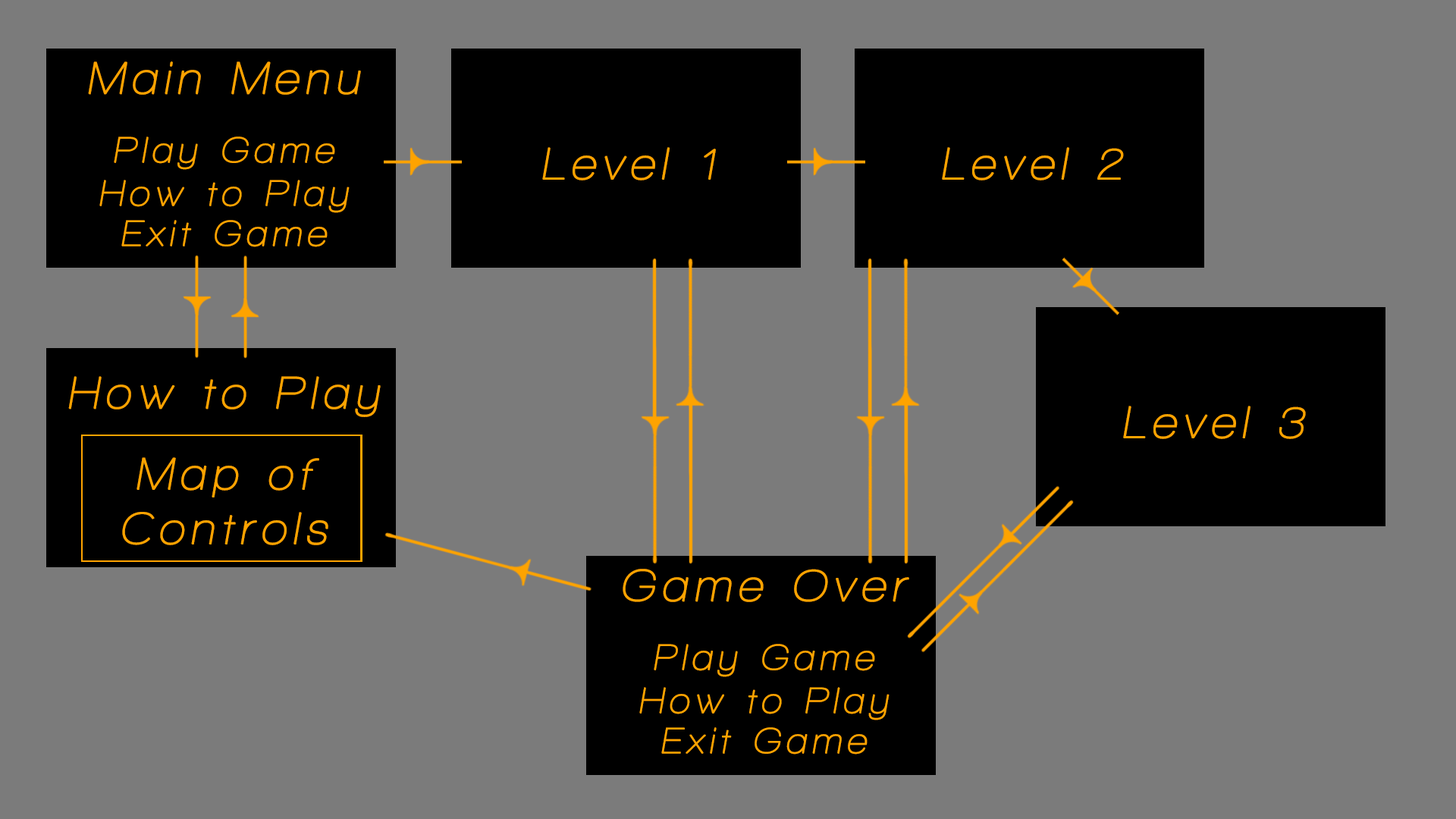
<style>
.page{position:relative;width:1456px;height:819px;background:#7b7b7b}
.page>*{position:absolute;margin:0}
.t1{font:45.5px "Walkway";letter-spacing:0.12em;color:#fea300;font-weight:bold;font-style:italic}
.t2{font:36.4px "Walkway";letter-spacing:0.12em;color:#fea300;font-weight:bold;font-style:italic}
</style>
<div class="page">
<p class="t1" style="left:88px;top:61px;width:273px;height:34px">Main Menu</p>
<p class="t2" style="left:114px;top:136px;width:221px;height:34px">Play Game</p>
<p class="t1" style="left:542px;top:147px;width:174px;height:33px">Level 1</p>
<p class="t1" style="left:942px;top:147px;width:182px;height:33px">Level 2</p>
<p class="t2" style="left:99px;top:180px;width:251px;height:33px">How to Play</p>
<p class="t2" style="left:121px;top:220px;width:207px;height:27px">Exit Game</p>
<p class="t1" style="left:68px;top:376px;width:313px;height:41px">How to Play</p>
<p class="t1" style="left:1123px;top:406px;width:183px;height:33px">Level 3</p>
<p class="t1" style="left:122px;top:457px;width:206px;height:88px;text-align:center">Map of <br>Controls</p>
<p class="t1" style="left:623px;top:569px;width:286px;height:33px">Game Over</p>
<p class="t2" style="left:654px;top:644px;width:221px;height:33px">Play Game</p>
<p class="t2" style="left:639px;top:687px;width:251px;height:33px">How to Play</p>
<p class="t2" style="left:661px;top:727px;width:207px;height:28px">Exit Game</p>
</div>
